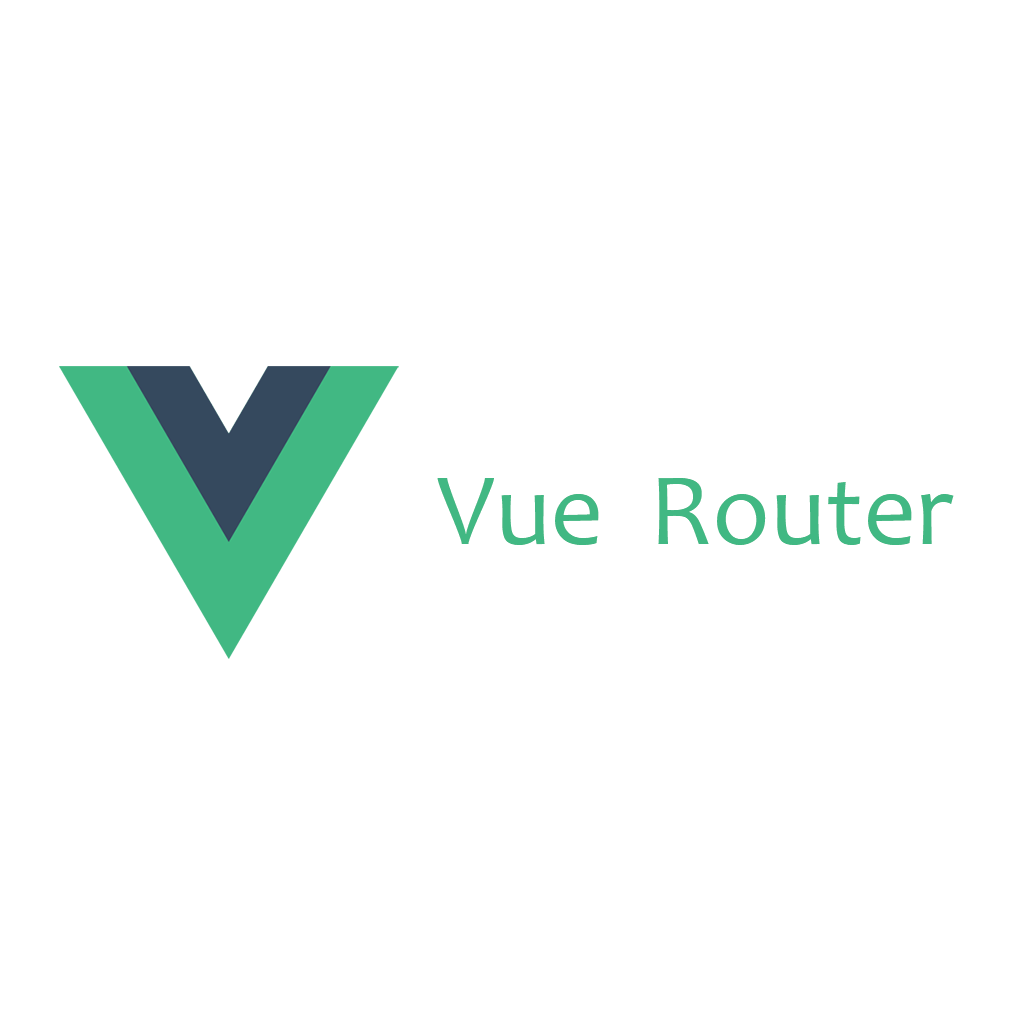
<style>
.page{position:relative;width:1024px;height:1024px;background:#ffffff}
.page>*{position:absolute;margin:0}
.t1{font:104px "Candara";color:#41b883}
</style>
<div class="page">
<p class="t1" style="left:437px;top:478px;width:517px;height:67px">Vue  Router</p>
</div>
